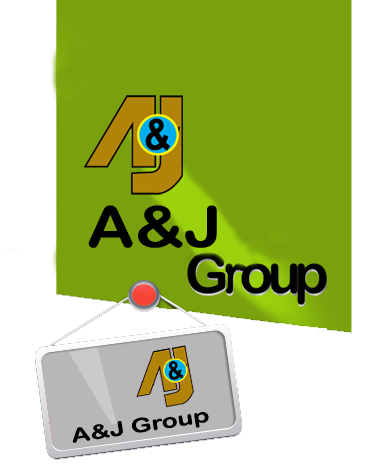
<style>
.page{position:relative;width:373px;height:469px;background:#79a10d}
.page>*{position:absolute;margin:0}
.t1{font:56.9px "ArialRoundedMTBold";color:#000000;scale:1.15 1}
.t2{font:19.6px "ArialRoundedMTBold";color:#000000;scale:1.33 1}
</style>
<div class="page">
<p class="t1" style="left:88px;top:205px;width:129px;height:43px">A&amp;J</p>
<p class="t2" style="left:72px;top:412px;width:137px;height:31px;rotate:-9deg">A&amp;J Group</p>
</div>
